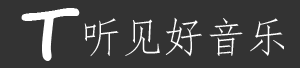
<style>
.page{position:relative;width:300px;height:68px;background:#333333}
.page>*{position:absolute;margin:0}
.t1{font:75px "SegoeScript-Bold";color:#ffffff}
.t2{font:41.7px "FangSong";color:#ffffff}
</style>
<div class="page">
<p class="t1" style="left:21px;top:8px;width:59px;height:53px">T</p>
<p class="t2" style="left:84px;top:17px;width:200px;height:40px">听见好音乐</p>
</div>
